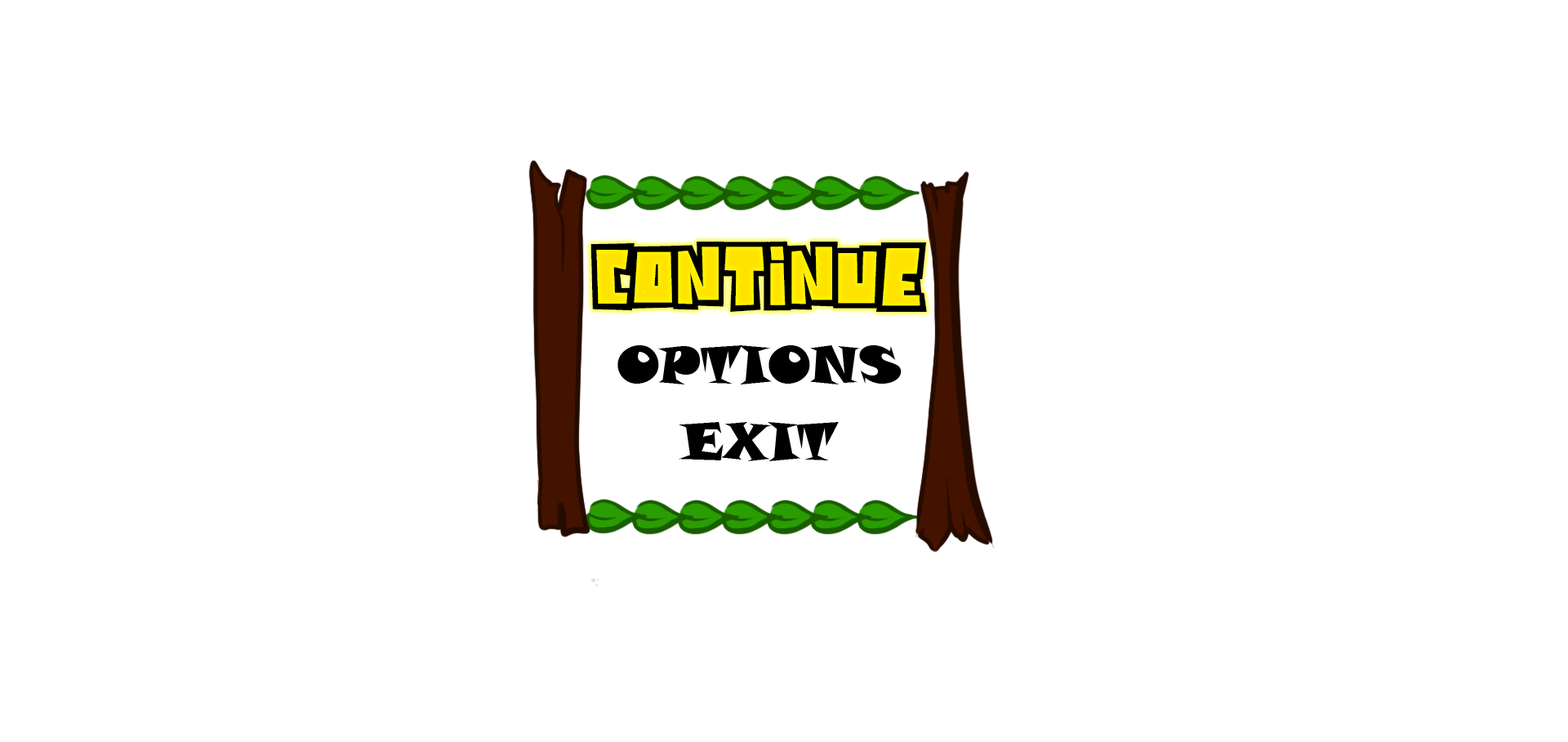
<style>
.page{position:relative;width:1568px;height:742px;background:#ffffff}
.page>*{position:absolute;margin:0}
.t1{font:41.3px "Powerful";color:#000000}
.t2{font:51.9px "SnapITC-Regular";color:#000000}
</style>
<div class="page">
<p class="t1" style="left:590px;top:241px;width:337px;height:71px">CONTINUE</p>
<p class="t2" style="left:617px;top:345px;width:285px;height:40px">OPTIONS</p>
<p class="t2" style="left:679px;top:422px;width:160px;height:39px">EXIT</p>
</div>
